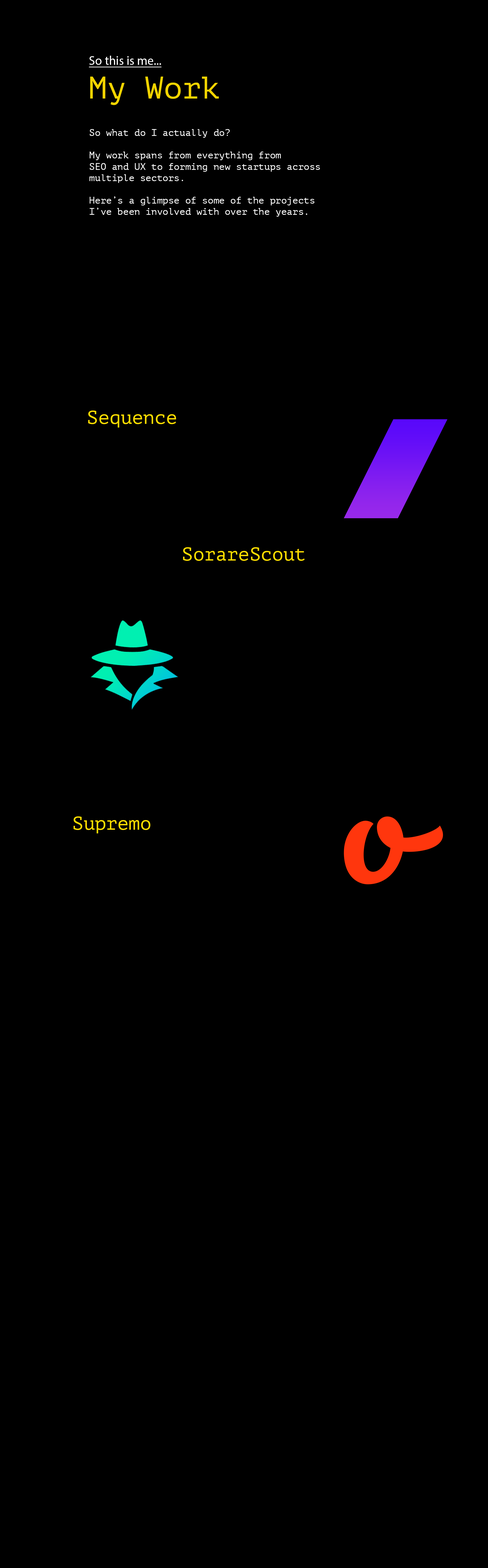
<style>
.page{position:relative;width:488px;height:1568px;background:#000000}
.page>*{position:absolute;margin:0}
.t1{font:12.5px "MyriadPro-Regular";color:#ffffff;text-decoration:underline}
.t2{font:31.4px "PTMono-Regular";color:#f3d400}
.t3{font:9.4px "PTMono-Regular";color:#ffffff}
.t4{font:18.8px "PTMono-Regular";color:#ffde00}
</style>
<div class="page">
<p class="t1" style="left:89px;top:56px;width:73px;height:11px">So this is me...</p>
<p class="t2" style="left:90px;top:77px;width:129px;height:28px">My Work</p>
<p class="t3" style="left:89px;top:129px;width:231px;height:88px">So what do I actually do?<br><br>My work spans from everything from<br>SEO and UX to forming new startups across<br>multiple sectors. <br><br>Here’s a glimpse of some of the projects<br>I’ve been involved with over the years.</p>
<p class="t4" style="left:88px;top:411px;width:88px;height:17px">Sequence</p>
<p class="t4" style="left:183px;top:547px;width:122px;height:14px">SorareScout</p>
<p class="t4" style="left:73px;top:816px;width:78px;height:17px">Supremo</p>
</div>
